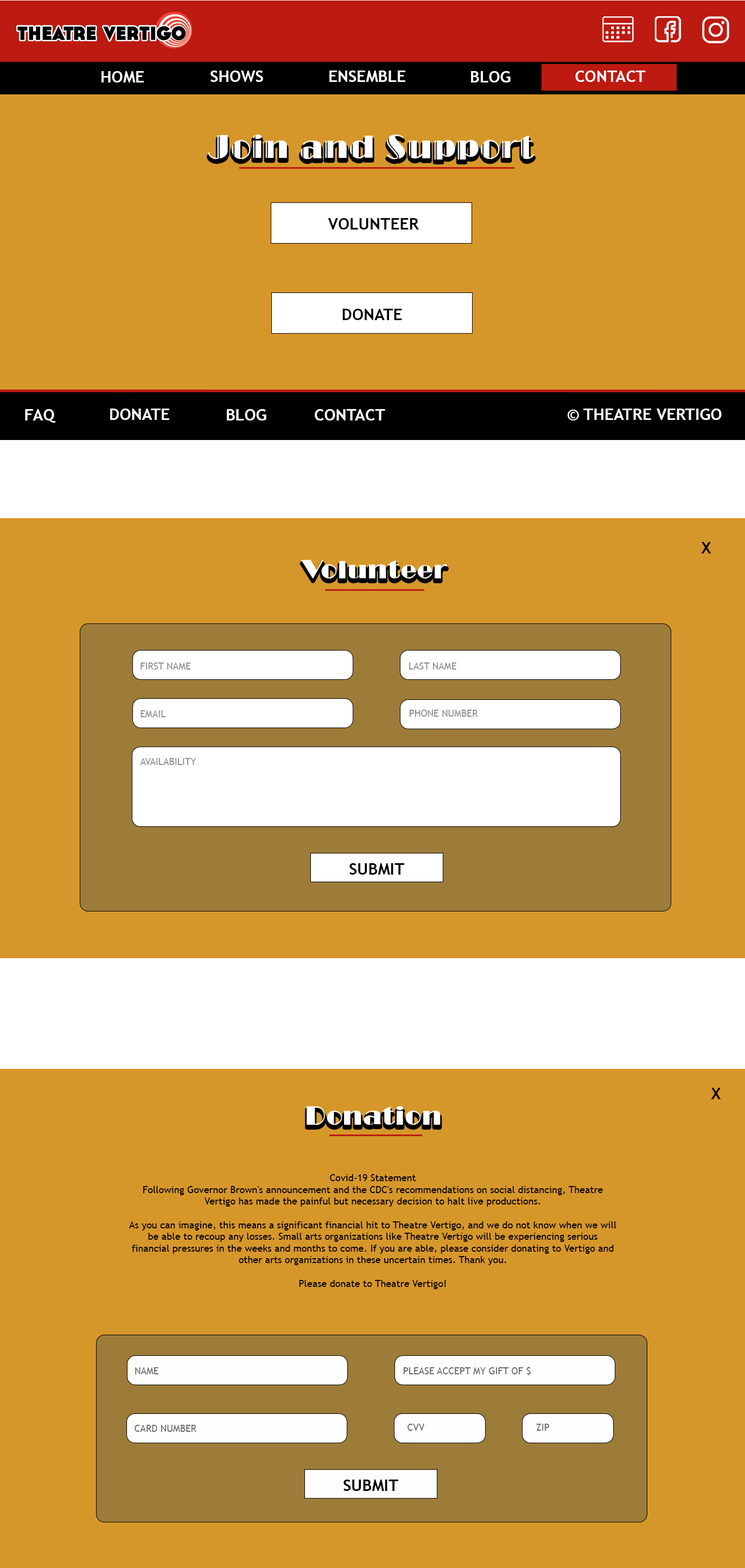
<style>
.page{position:relative;width:745px;height:1568px;background:#d6972a}
.page>*{position:absolute;margin:0}
.t1{font:16.3px "TrebuchetMS-Bold";color:#fefefe;text-transform:uppercase}
.t2{font:32.6px "LTCBroadway-Engraved";color:#ffffff}
.t3{font:16.3px "TrebuchetMS-Bold";color:#000000;text-transform:uppercase}
.t4{font:16.3px "TrebuchetMS-Bold";color:#ffffff;text-transform:uppercase}
.t5{font:16.3px "TrebuchetMS-Bold";color:#000000}
.t6{font:26px "LTCBroadway-Regular";color:#ffffff}
.t7{font:9.8px "TrebuchetMS";color:#8f8f8f;text-transform:uppercase}
.t8{font:26px "LTCBroadway-Regular";color:#fefefe}
.t9{font:9.8px "TrebuchetMS";color:#000000}
.t10{font:9.8px "TrebuchetMS";color:#6a6a6a;text-transform:uppercase}
</style>
<div class="page">
<p class="t1" style="left:101px;top:71px;width:43px;height:11px">Home</p>
<p class="t1" style="left:211px;top:71px;width:52px;height:11px">Shows</p>
<p class="t1" style="left:329px;top:71px;width:76px;height:11px">Ensemble</p>
<p class="t1" style="left:471px;top:71px;width:40px;height:11px">Blog</p>
<p class="t1" style="left:575px;top:71px;width:71px;height:11px">Contact</p>
<p class="t2" style="left:208px;top:135px;width:326px;height:25px">Join and Support</p>
<p class="t3" style="left:328px;top:218px;width:91px;height:12px">Volunteer</p>
<p class="t3" style="left:342px;top:309px;width:60px;height:11px">Donate</p>
<p class="t4" style="left:25px;top:409px;width:30px;height:14px">FAQ</p>
<p class="t4" style="left:110px;top:409px;width:59px;height:11px">Donate</p>
<p class="t4" style="left:227px;top:409px;width:39px;height:11px">Blog</p>
<p class="t4" style="left:315px;top:409px;width:70px;height:11px">Contact</p>
<p class="t4" style="left:568px;top:409px;width:154px;height:11px">© Theatre Vertigo</p>
<p class="t5" style="left:701px;top:542px;width:10px;height:11px">X</p>
<p class="t6" style="left:301px;top:560px;width:146px;height:18px">Volunteer</p>
<p class="t7" style="left:141px;top:662px;width:50px;height:8px">First Name</p>
<p class="t7" style="left:409px;top:662px;width:47px;height:8px">last Name</p>
<p class="t7" style="left:141px;top:710px;width:25px;height:7px">Email</p>
<p class="t7" style="left:409px;top:710px;width:69px;height:7px">Phone Number</p>
<p class="t7" style="left:140px;top:758px;width:56px;height:7px">Availability</p>
<p class="t3" style="left:349px;top:863px;width:55px;height:12px">Submit</p>
<p class="t5" style="left:711px;top:1088px;width:10px;height:11px">X</p>
<p class="t8" style="left:307px;top:1106px;width:134px;height:19px">Donation</p>
<p class="t9" style="left:129px;top:1174px;width:487px;height:115px;text-align:center">Covid-19 Statement<br>Following Governor Brown's announcement and the CDC's recommendations on social distancing, Theatre Vertigo has made the painful but necessary decision to halt live productions.<br><br>As you can imagine, this means a significant financial hit to Theatre Vertigo, and we do not know when we will be able to recoup any losses. Small arts organizations like Theatre Vertigo will be experiencing serious financial pressures in the weeks and months to come. If you are able, please consider donating to Vertigo and other arts organizations in these uncertain times. Thank you.<br><br>Please donate to Theatre Vertigo!</p>
<p class="t10" style="left:135px;top:1367px;width:23px;height:7px">Name</p>
<p class="t10" style="left:403px;top:1367px;width:128px;height:8px">Please accept my gift of $</p>
<p class="t10" style="left:135px;top:1425px;width:61px;height:7px">Card Number</p>
<p class="t10" style="left:407px;top:1424px;width:18px;height:7px">CVV</p>
<p class="t10" style="left:536px;top:1424px;width:14px;height:7px">Zip</p>
<p class="t3" style="left:343px;top:1480px;width:55px;height:11px">Submit</p>
</div>
